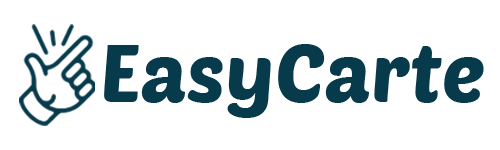
<style>
.page{position:relative;width:500px;height:150px;background:#ffffff}
.page>*{position:absolute;margin:0}
.t1{font:81.4px "PoetsenOne-Regular";color:#073b4c}
</style>
<div class="page">
<p class="t1" style="left:104px;top:44px;width:380px;height:74px">EasyCarte</p>
</div>
